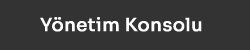
<style>
.page{position:relative;width:250px;height:50px;background:#333333}
.page>*{position:absolute;margin:0}
.t1{font:18px "Sora-Medium";color:#ffffff;font-weight:bold}
</style>
<div class="page">
<p class="t1" style="left:40px;top:17px;width:162px;height:15px">Yönetim Konsolu</p>
</div>
